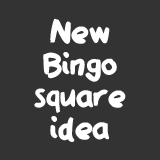
<style>
.page{position:relative;width:160px;height:160px;background:#333333}
.page>*{position:absolute;margin:0}
.t1{font:35.9px/31.9px "QAReports";color:#ffffff}
</style>
<div class="page">
<p class="t1" style="left:34px;top:18px;width:92px;height:124px;text-align:center">New<br>Bingo<br>square<br>idea</p>
</div>
